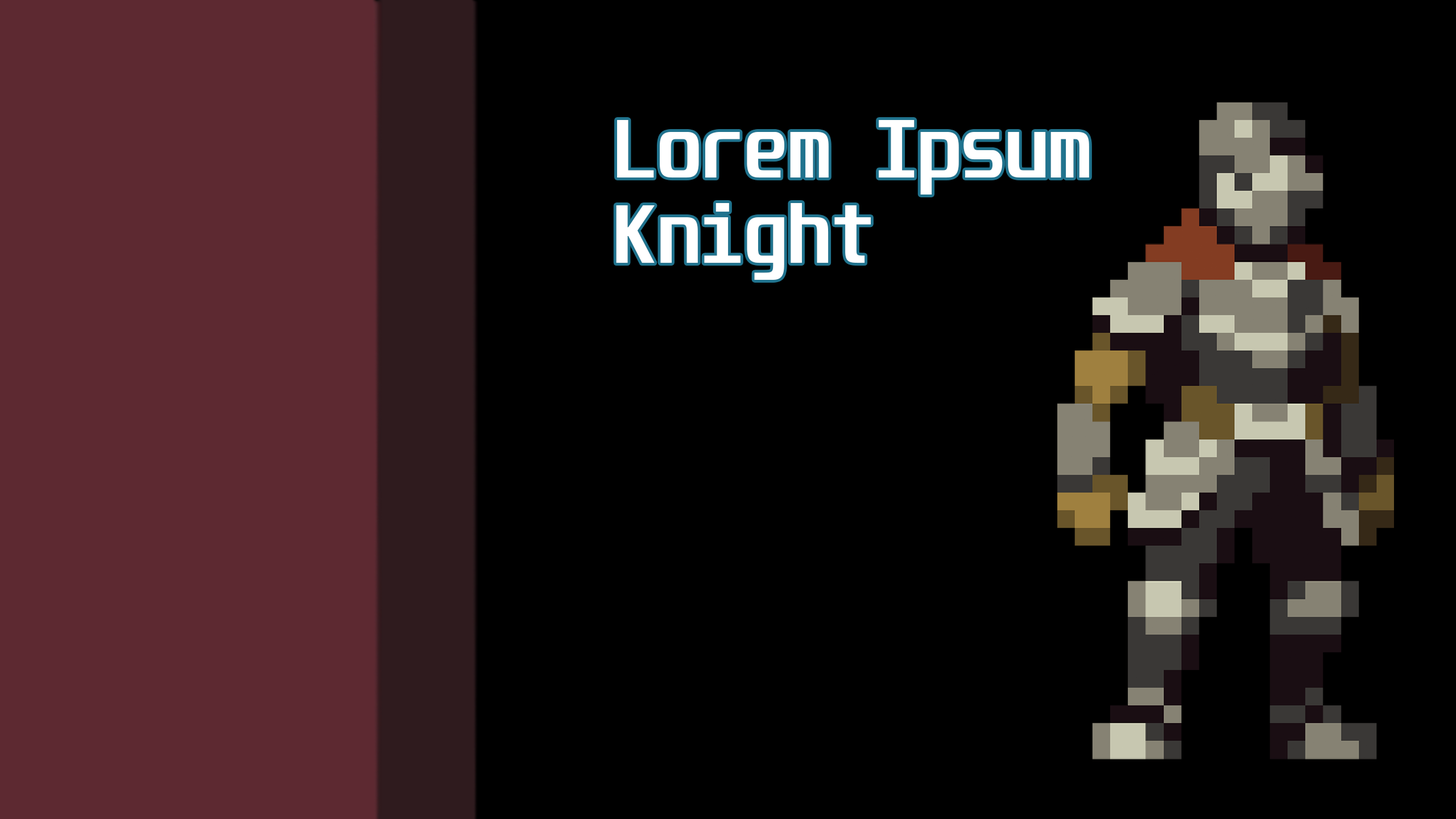
<style>
.page{position:relative;width:1456px;height:819px;background:#000000}
.page>*{position:absolute;margin:0}
.t1{font:71.1px "Unispace-Bold";color:#ffffff}
</style>
<div class="page">
<p class="t1" style="left:616px;top:120px;width:473px;height:160px">Lorem Ipsum<br>Knight</p>
</div>
